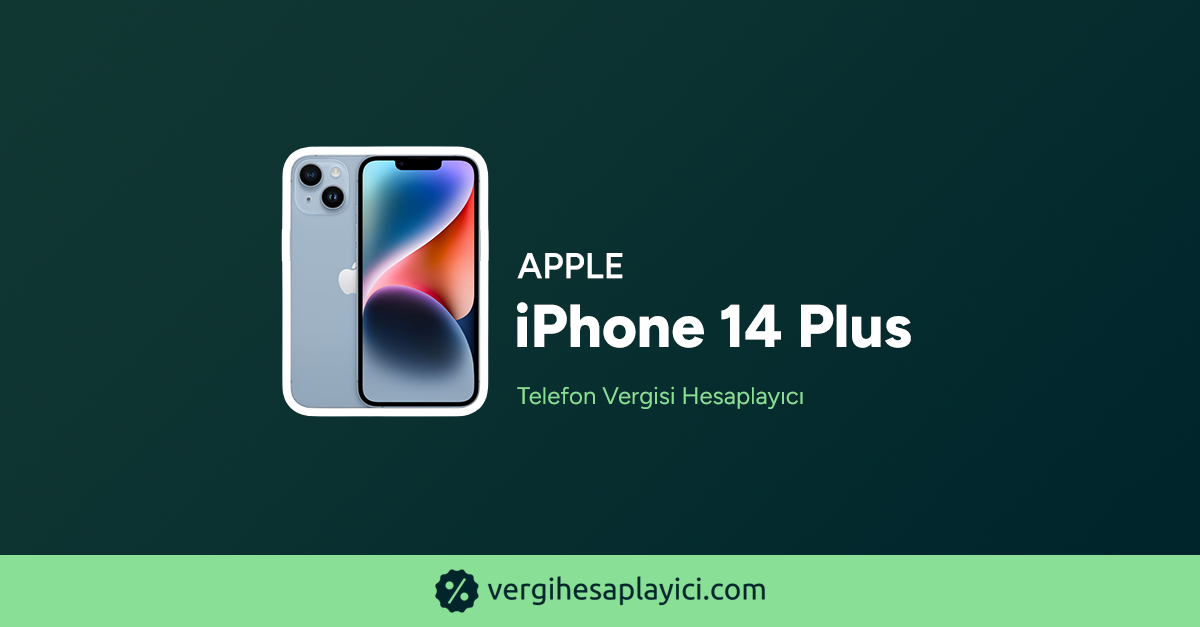
<style>
.page{position:relative;width:1200px;height:627px}
.page>*{position:absolute;margin:0}
.t1{font:36px "Figtree-SemiBold";color:#ffffff;text-transform:uppercase;font-weight:bold}
.t2{font:60.3px "Figtree-ExtraBold";color:#ffffff;font-weight:bold}
.t3{font:24px "Figtree-Regular";color:#88df95;font-weight:bold}
</style>
<div class="page">
<p class="t1" style="left:517px;top:253px;width:106px;height:26px">Apple</p>
<p class="t2" style="left:517px;top:302px;width:394px;height:46px">iPhone 14 Plus</p>
<p class="t3" style="left:517px;top:386px;width:286px;height:23px">Telefon Vergisi Hesaplayıcı</p>
</div>
